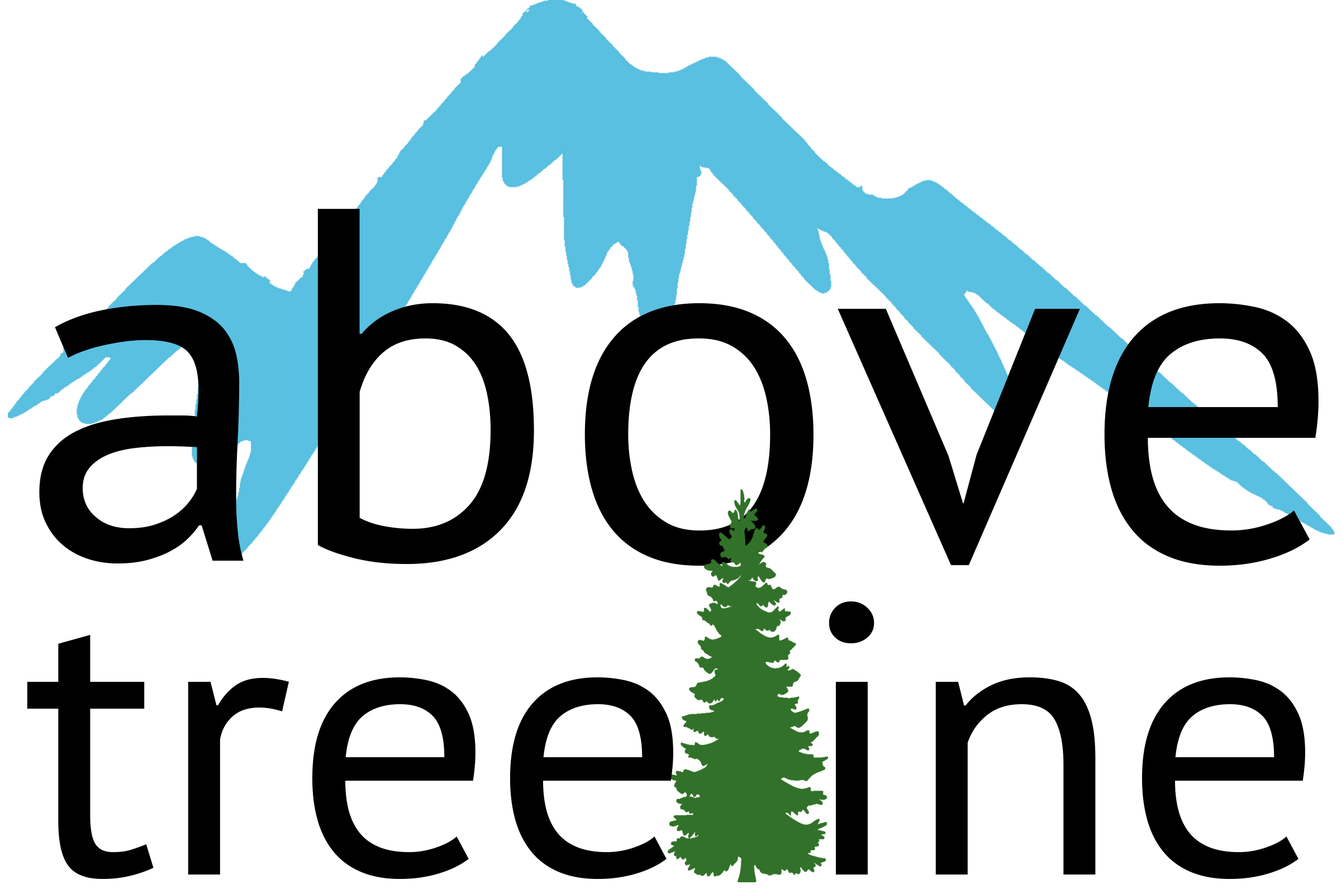
<style>
.page{position:relative;width:1341px;height:889px;background:#ffffff}
.page>*{position:absolute;margin:0}
.t1{font:501.1px "PTSans-Regular";color:#000000;scale:1.04 1}
.t2{font:385.5px "PTSans-Regular";color:#000000;scale:1.03 1}
</style>
<div class="page">
<p class="t1" style="left:39px;top:209px;width:1279px;height:357px">above</p>
<p class="t2" style="left:27px;top:602px;width:1278px;height:277px">tree ine</p>
</div>
